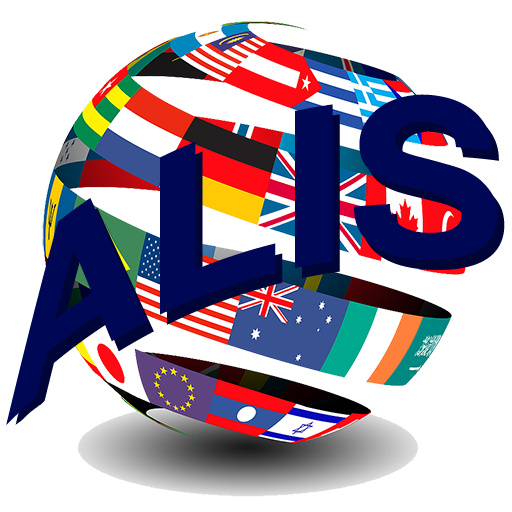
<style>
.page{position:relative;width:512px;height:512px;background:#ffffff}
.page>*{position:absolute;margin:0}
.t1{font:220px "HelveticaNeue-Bold";color:#000856}
</style>
<div class="page">
<p class="t1" style="left:6px;top:94px;width:492px;height:331px">ALIS</p>
</div>
